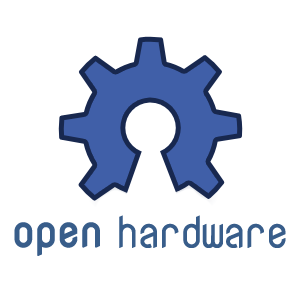
<style>
.page{position:relative;width:300px;height:300px;background:#ffffff}
.page>*{position:absolute;margin:0}
.t1{font:44px "NovaMono";letter-spacing:-0.075em;color:#385d8a;font-weight:bold}
.t2{font:44px "NovaMono";letter-spacing:-0.075em;color:#385d8a}
</style>
<div class="page">
<p class="t1" style="left:14px;top:222px;width:86px;height:34px">open</p>
<p class="t2" style="left:119px;top:215px;width:167px;height:33px">hardware</p>
</div>
